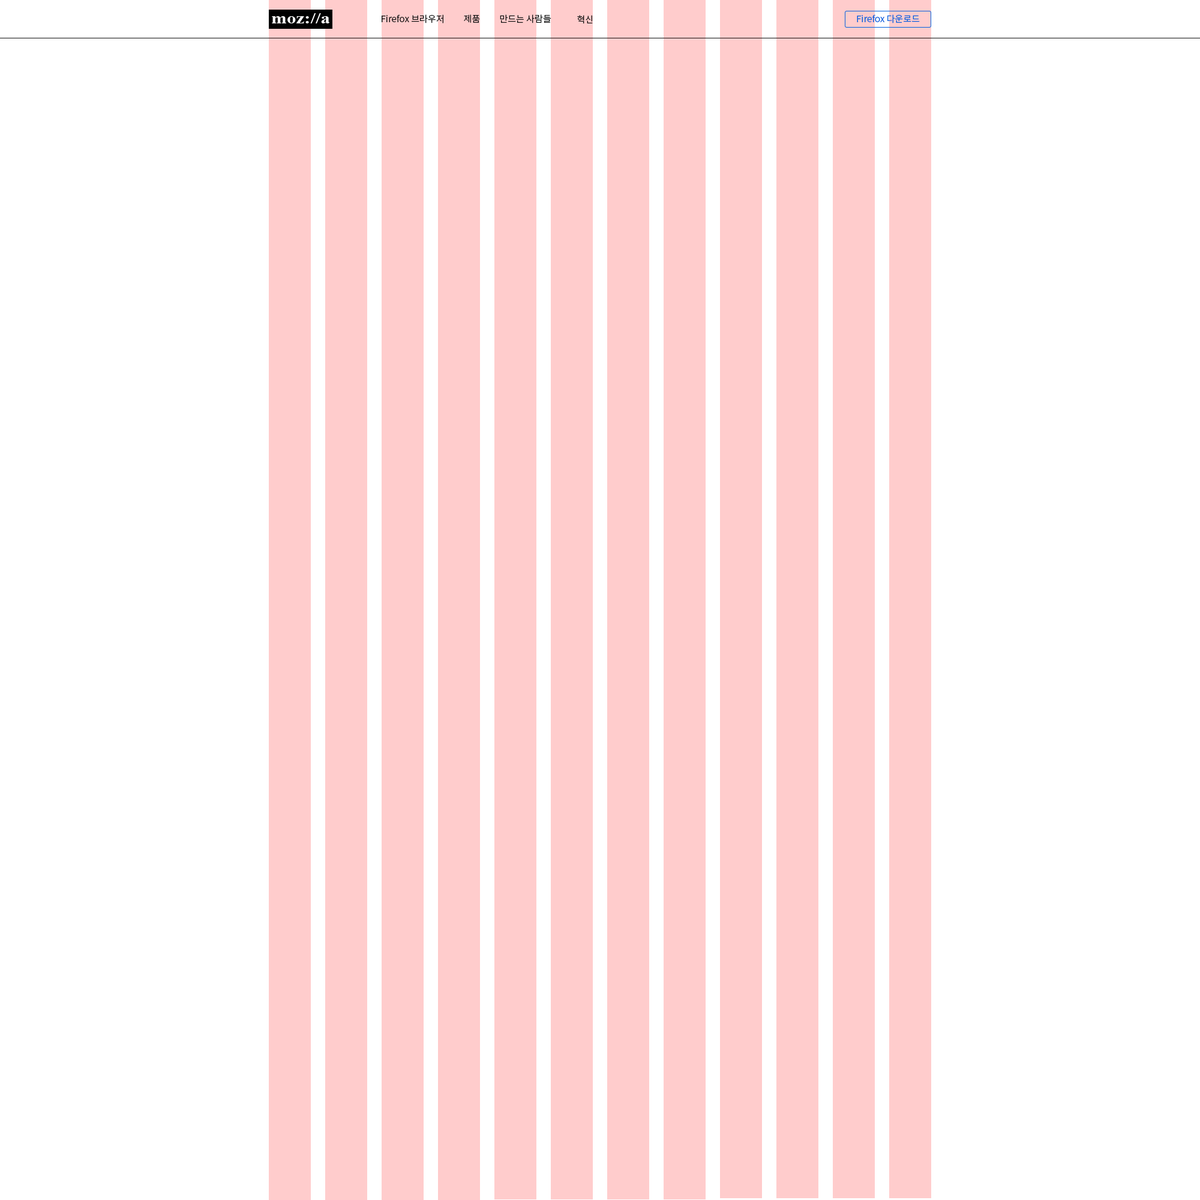
<style>
.page{position:relative;width:1200px;height:1200px;background:#ffffff}
.page>*{position:absolute;margin:0}
.t1{font:9px "NotoSansKR-Regular";color:#111111}
.t2{font:9px "NotoSansKR-Regular";color:#0060df}
</style>
<div class="page">
<p class="t1" style="left:382px;top:14px;width:61px;height:9px">Firefox 브라우저</p>
<p class="t1" style="left:464px;top:14px;width:16px;height:9px">제품</p>
<p class="t1" style="left:500px;top:14px;width:51px;height:9px">만드는 사람들</p>
<p class="t1" style="left:577px;top:15px;width:16px;height:9px">혁신</p>
<p class="t2" style="left:857px;top:14px;width:63px;height:9px">Firefox 다운로드</p>
</div>
